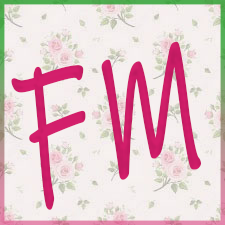
<style>
.page{position:relative;width:225px;height:225px}
.page>*{position:absolute;margin:0}
.t1{font:190.6px "InkFree";letter-spacing:0.05em;color:#d31d6a;text-transform:uppercase;font-weight:bold;scale:0.67 1}
</style>
<div class="page">
<p class="t1" style="left:11px;top:41px;width:191px;height:169px;rotate:-4deg">fm</p>
</div>
